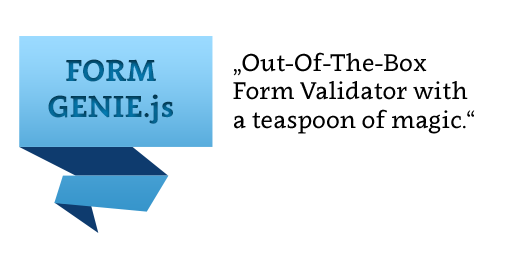
<style>
.page{position:relative;width:512px;height:256px;background:#ffffff}
.page>*{position:absolute;margin:0}
.t1{font:24px "Clavo-Regular";color:#000000}
.t2{font:30px "Clavo-Bold";text-transform:uppercase}
.t3{font:30px "Clavo-Bold"}
</style>
<div class="page">
<p class="t1" style="left:233px;top:52px;width:242px;height:82px">„Out-Of-The-Box<br>Form Validator with<br>a teaspoon of magic.“</p>
<p class="t2" style="left:48px;top:59px;width:125px;height:65px;text-align:center">Form<br>Genie<span class="t3">.js</span></p>
</div>
